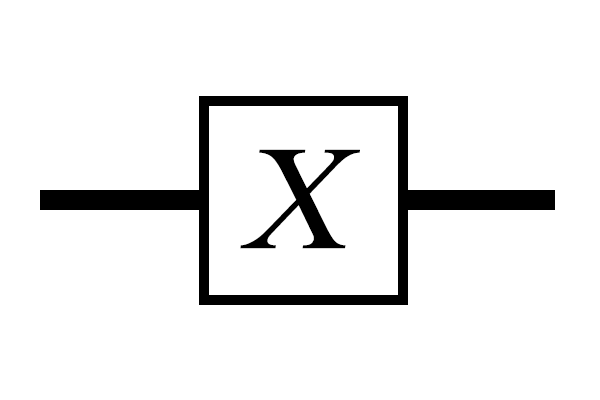
<style>
.page{position:relative;width:600px;height:400px;background:#ffffff}
.page>*{position:absolute;margin:0}
.t1{font:148.5px "TimesNewRomanPSMT";color:#000000;font-style:italic}
</style>
<div class="page">
<p class="t1" style="left:240px;top:149px;width:120px;height:100px">X</p>
</div>
